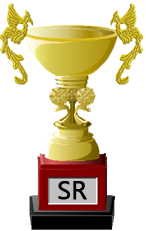
<style>
.page{position:relative;width:146px;height:231px;background:#ffffff}
.page>*{position:absolute;margin:0}
.t1{font:25px "MalgunGothicRegular";color:#000000;font-weight:bold}
</style>
<div class="page">
<p class="t1" style="left:58px;top:181px;width:29px;height:19px">SR</p>
</div>
